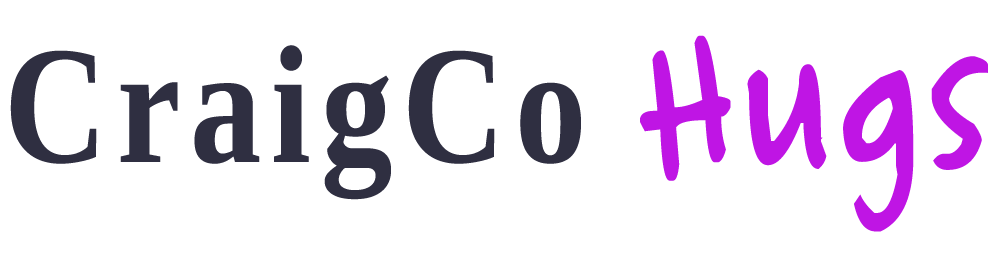
<style>
.page{position:relative;width:1000px;height:267px;background:#ffffff}
.page>*{position:absolute;margin:0}
.t1{font:168px "LiberationSerif-Bold";letter-spacing:0.068em;color:#2f2f41;scale:0.85 1}
.t2{font:250px "CompleteinHim";letter-spacing:0.068em;color:#bf15e4;scale:0.85 1}
</style>
<div class="page">
<p class="t1" style="left:10px;top:35px;width:978px;height:197px">CraigCo <span class="t2">Hugs</span></p>
</div>
